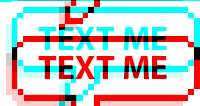
<style>
.page{position:relative;width:200px;height:106px;background:#ffffff}
.page>*{position:absolute;margin:0}
.t1{font:34px "MyriadPro-Bold"}
</style>
<div class="page">
<p class="t1" style="left:38px;top:26px;width:129px;height:23px">TEXT ME</p>
</div>
